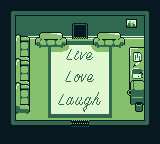
<style>
.page{position:relative;width:160px;height:144px;background:#071821}
.page>*{position:absolute;margin:0}
.t1{font:18.4px "SignPainter-HouseScript";letter-spacing:0.08em;color:#306850}
</style>
<div class="page">
<p class="t1" style="left:58px;top:49px;width:43px;height:63px;text-align:center">Live<br>Love<br>Laugh</p>
</div>
